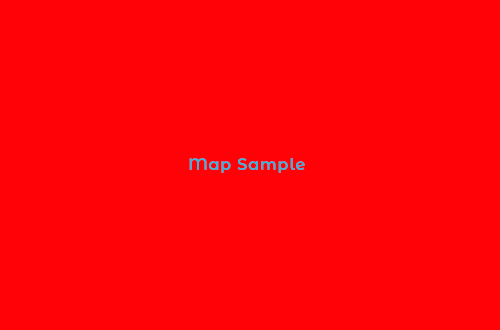
<style>
.page{position:relative;width:500px;height:330px;background:#ff0208}
.page>*{position:absolute;margin:0}
.t1{font:16px "MontserratAlternates-SemiBold";letter-spacing:0.05em;color:#35b6e1}
</style>
<div class="page">
<p class="t1" style="left:189px;top:158px;width:116px;height:15px">Map Sample</p>
</div>
